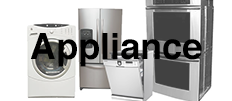
<style>
.page{position:relative;width:232px;height:101px;background:#ffffff}
.page>*{position:absolute;margin:0}
.t1{font:36px "Helvetica-Bold";color:#000000}
</style>
<div class="page">
<p class="t1" style="left:30px;top:33px;width:172px;height:34px">Appliance</p>
</div>
